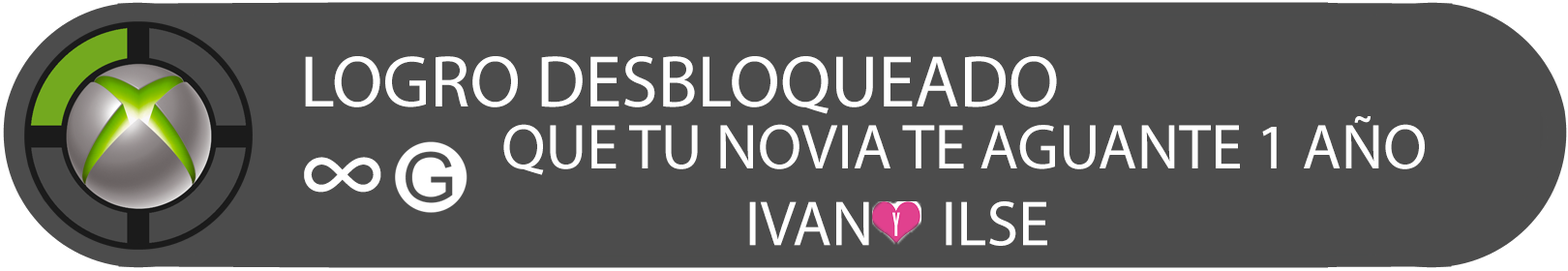
<style>
.page{position:relative;width:1568px;height:271px;background:#4c4c4c}
.page>*{position:absolute;margin:0}
.t1{font:73.6px "MyriadPro-Regular";color:#ffffff}
.t2{font:63.9px "MyriadPro-Regular";color:#ffffff}
.t3{font:116.1px "MyriadPro-Regular";color:#ffffff}
</style>
<div class="page">
<p class="t1" style="left:305px;top:56px;width:752px;height:58px">LOGRO DESBLOQUEADO</p>
<p class="t2" style="left:503px;top:116px;width:922px;height:130px">QUE TU NOVIA TE AGUANTE 1 AÑO<br>                  IVAN     ILSE</p>
<p class="t3" style="left:304px;top:157px;width:77px;height:36px">∞</p>
</div>
